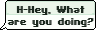
<style>
.page{position:relative;width:96px;height:30px;background:#fcfffb}
.page>*{position:absolute;margin:0}
.t1{font:10px "SFPixelate-Bold";color:#1b281e;scale:0.95 1}
</style>
<div class="page">
<p class="t1" style="left:7px;top:6px;width:86px;height:21px;text-align:center">H-Hey, What<br>are you doing?</p>
<p class="t1" style="left:8px;top:6px;width:86px;height:21px;text-align:center">H-Hey, What<br>are you doing?</p>
</div>
